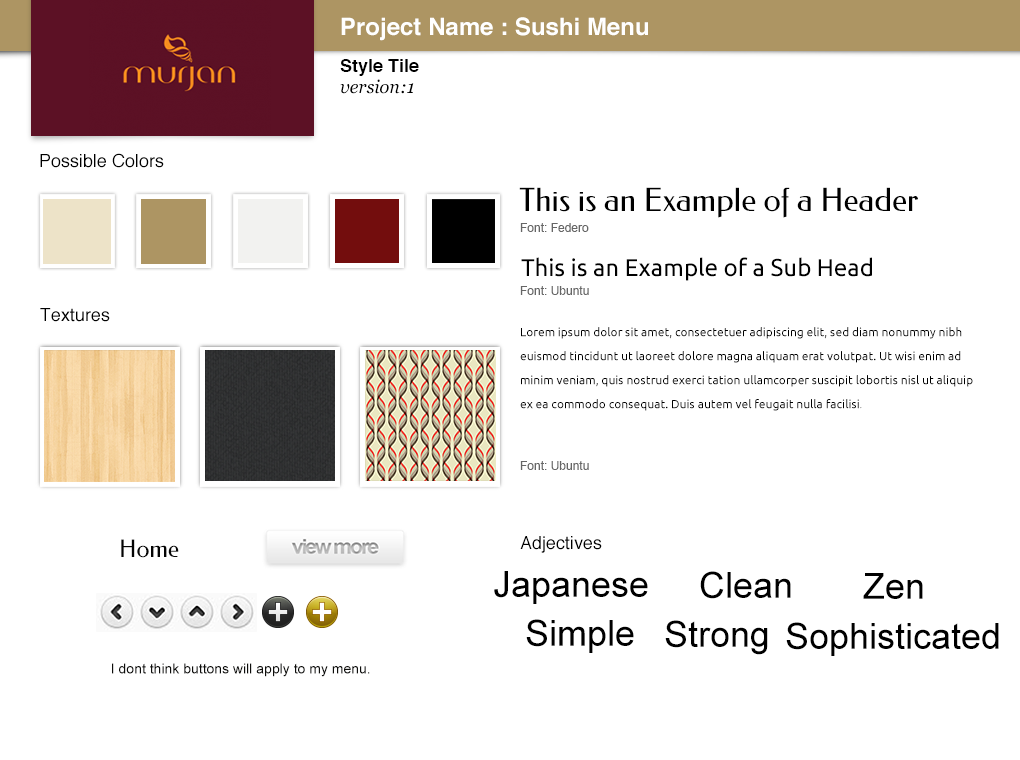
<style>
.page{position:relative;width:1020px;height:760px;background:#ffffff}
.page>*{position:absolute;margin:0}
.t1{font:24px "Helvetica-Bold";color:#ffffff}
.t2{font:18px "Helvetica-Bold";color:#000000}
.t3{font:18px "Georgia-Italic";color:#000000}
.t4{font:18px "Helvetica";color:#000000}
.t5{font:32px "Federo-Regular";color:#000000}
.t6{font:12px "ArialMT";color:#666666}
.t7{font:24px "Ubuntu";color:#000000}
.t8{font:12px/24px "Ubuntu";color:#000000}
.t9{font:12px/24px "Ubuntu-Light";color:#000000}
.t10{font:24px "Federo-Regular";color:#040404}
.t11{font:36px "ArialMT";color:#000000}
.t12{font:14px "ArialMT";color:#0d0d0b}
</style>
<div class="page">
<p class="t1" style="left:341px;top:17px;width:307px;height:24px">Project Name : Sushi Menu</p>
<p class="t2" style="left:340px;top:59px;width:79px;height:17px">Style Tile</p>
<p class="t3" style="left:340px;top:79px;width:74px;height:15px">version:1</p>
<p class="t4" style="left:40px;top:153px;width:124px;height:15px">Possible Colors</p>
<p class="t5" style="left:519px;top:187px;width:399px;height:31px">This is an Example of a Header</p>
<p class="t6" style="left:520px;top:223px;width:69px;height:9px">Font: Federo</p>
<p class="t7" style="left:521px;top:257px;width:351px;height:24px">This is an Example of a Sub Head</p>
<p class="t6" style="left:520px;top:286px;width:69px;height:9px">Font: Ubuntu</p>
<p class="t4" style="left:40px;top:308px;width:70px;height:14px">Textures</p>
<p class="t8" style="left:520px;top:327px;width:453px;height:84px">Lorem ipsum dolor sit amet, consectetuer adipiscing elit, sed diam nonummy nibh euismod tincidunt ut laoreet dolore magna aliquam erat volutpat. Ut wisi enim ad minim veniam, quis nostrud exerci tation ullamcorper suscipit lobortis nisl ut aliquip ex ea commodo consequat. Duis autem vel feugait nulla facilisi<span class="t9">.</span></p>
<p class="t6" style="left:520px;top:461px;width:69px;height:9px">Font: Ubuntu</p>
<p class="t10" style="left:121px;top:539px;width:58px;height:19px">Home</p>
<p class="t4" style="left:520px;top:536px;width:82px;height:17px">Adjectives</p>
<p class="t11" style="left:494px;top:571px;width:154px;height:33px">Japanese</p>
<p class="t11" style="left:700px;top:571px;width:91px;height:28px">Clean</p>
<p class="t11" style="left:863px;top:573px;width:60px;height:26px">Zen</p>
<p class="t11" style="left:526px;top:619px;width:108px;height:34px">Simple</p>
<p class="t11" style="left:665px;top:620px;width:103px;height:35px">Strong</p>
<p class="t11" style="left:786px;top:622px;width:213px;height:34px">Sophisticated</p>
<p class="t12" style="left:112px;top:663px;width:258px;height:14px">I dont think buttons will apply to my menu.</p>
</div>
